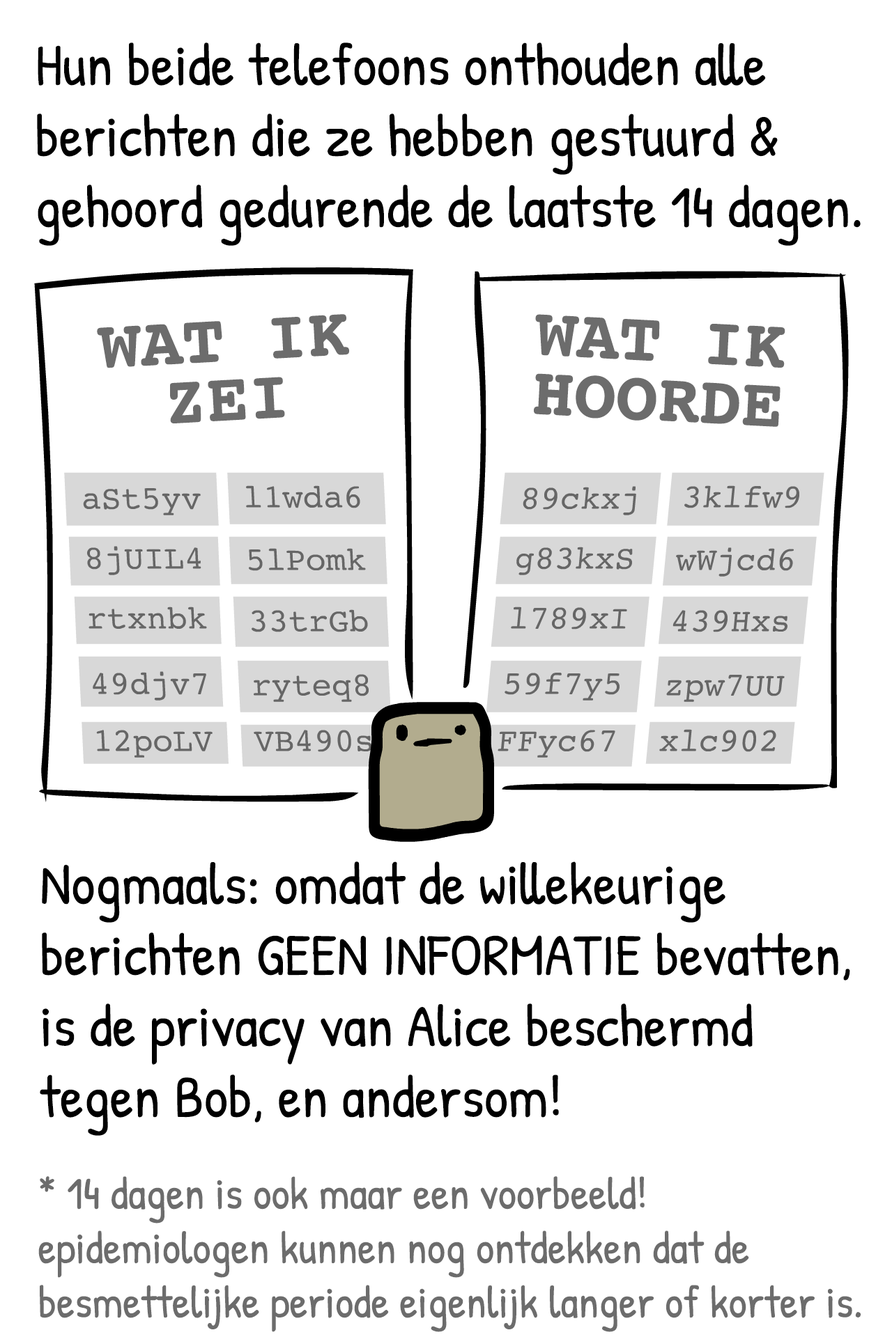
<style>
.page{position:relative;width:892px;height:1337px;background:#ffffff}
.page>*{position:absolute;margin:0}
.t1{font:59.2px "PatrickHand-Regular";color:#000000}
.t2{font:69.7px/59.2px "Courier-Bold";color:#6c6c6c}
.t3{font:45.3px "PatrickHand-Regular";color:#6c6c6c}
</style>
<div class="page">
<p class="t1" style="left:37px;top:42px;width:823px;height:204px">Hun beide telefoons onthouden alle<br>berichten die ze hebben gestuurd &amp;<br>gehoord gedurende de laatste 14 dagen.</p>
<p class="t2" style="left:97px;top:314px;width:252px;height:110px;text-align:center;rotate:-3deg">WAT IK<br>ZEI</p>
<p class="t2" style="left:534px;top:314px;width:251px;height:113px;text-align:center;rotate:3deg">WAT IK<br>HOORDE</p>
<p class="t1" style="left:40px;top:862px;width:810px;height:274px">Nogmaals: omdat de willekeurige<br>berichten GEEN INFORMATIE bevatten,<br>is de privacy van Alice beschermd<br>tegen Bob, en andersom!</p>
<p class="t3" style="left:38px;top:1176px;width:823px;height:157px">* 14 dagen is ook maar een voorbeeld!<br>epidemiologen kunnen nog ontdekken dat de<br>besmettelijke periode eigenlijk langer of korter is.</p>
</div>
